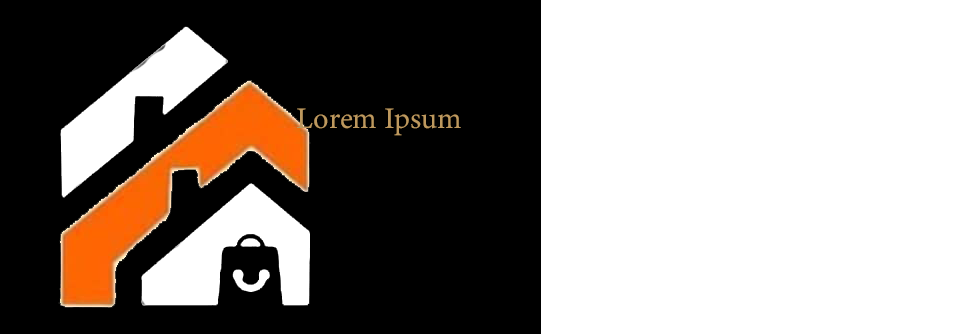
<style>
.page{position:relative;width:953px;height:334px;background:#ffffff}
.page>*{position:absolute;margin:0}
.t1{font:30px "MinionVariableConcept-Roman";color:#bd985e}
</style>
<div class="page">
<p class="t1" style="left:297px;top:108px;width:164px;height:28px">Lorem Ipsum</p>
</div>
